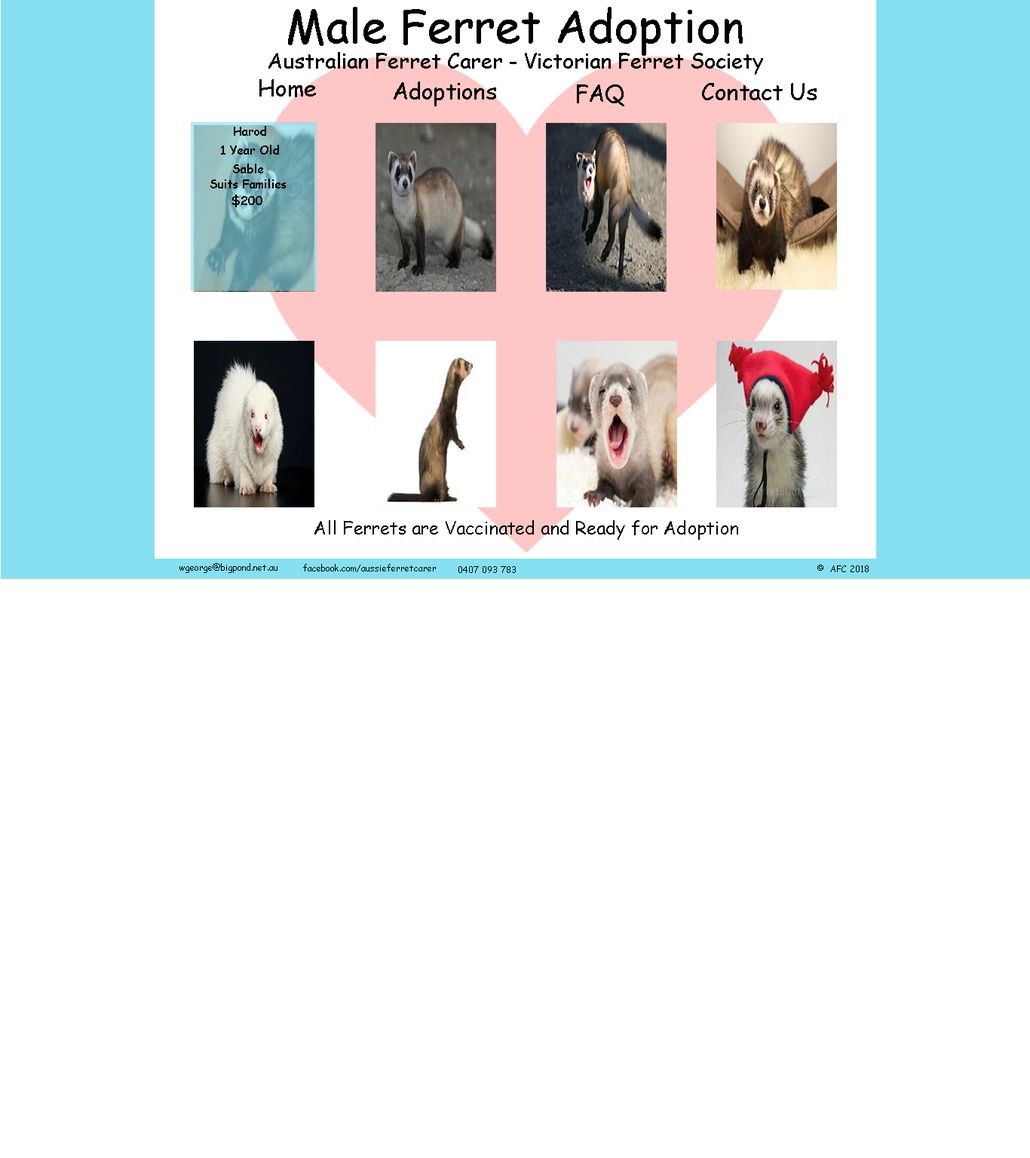
<style>
.page{position:relative;width:1030px;height:1158px;background:#ffffff}
.page>*{position:absolute;margin:0}
.t1{font:45.2px "ComicSansMS";color:#000000}
.t2{font:21.1px "ComicSansMS";color:#000000}
.t3{font:22.6px "ComicSansMS";color:#000000}
.t4{font:12.1px "ComicSansMS";color:#000000}
.t5{font:18.1px "ComicSansMS";color:#000000}
.t6{font:9px "ComicSansMS";color:#000000}
</style>
<div class="page">
<p class="t1" style="left:288px;top:7px;width:455px;height:49px">Male Ferret Adoption</p>
<p class="t2" style="left:268px;top:52px;width:495px;height:23px">Australian Ferret Carer - Victorian Ferret Society</p>
<p class="t3" style="left:394px;top:81px;width:102px;height:25px">Adoptions</p>
<p class="t3" style="left:577px;top:84px;width:47px;height:22px">FAQ</p>
<p class="t3" style="left:702px;top:83px;width:114px;height:17px">Contact Us</p>
<p class="t4" style="left:234px;top:126px;width:32px;height:10px">Harod</p>
<p class="t4" style="left:221px;top:145px;width:58px;height:10px">1 Year Old</p>
<p class="t4" style="left:233px;top:164px;width:30px;height:9px">Sable</p>
<p class="t4" style="left:210px;top:179px;width:76px;height:9px">Suits Families</p>
<p class="t4" style="left:232px;top:194px;width:30px;height:13px">$200</p>
<p class="t5" style="left:314px;top:520px;width:424px;height:20px">All Ferrets are Vaccinated and Ready for Adoption</p>
<p class="t6" style="left:179px;top:563px;width:98px;height:10px">wgeorge@bigpond.net.au</p>
<p class="t6" style="left:303px;top:564px;width:133px;height:8px">facebook.com/aussieferretcarer</p>
<p class="t6" style="left:458px;top:566px;width:58px;height:7px">0407 093 783</p>
<p class="t6" style="left:817px;top:565px;width:51px;height:7px">©  AFC 2018</p>
</div>
